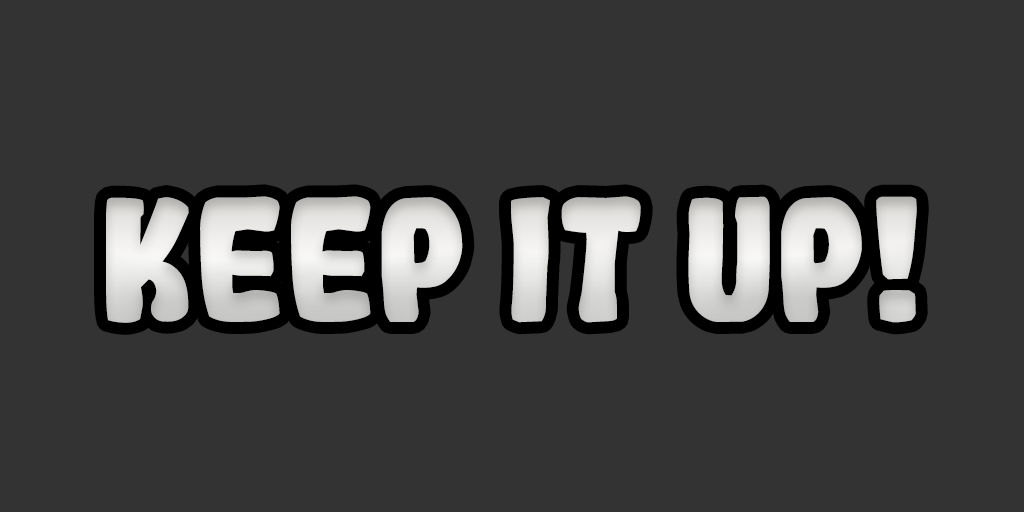
<style>
.page{position:relative;width:1024px;height:512px;background:#333333}
.page>*{position:absolute;margin:0}
.t1{font:166.7px "Gogono-Cocoa-Mochi";color:#dededc}
</style>
<div class="page">
<p class="t1" style="left:106px;top:196px;width:811px;height:127px">KEEP IT UP!</p>
</div>
